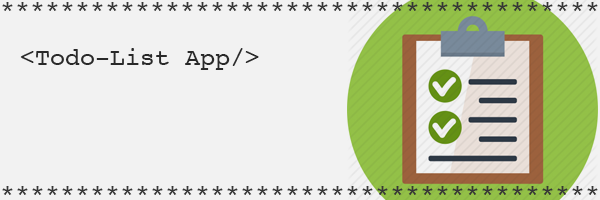
<style>
.page{position:relative;width:600px;height:200px;background:#f2f2f2}
.page>*{position:absolute;margin:0}
.t1{font:25px "Courier";color:#363636}
</style>
<div class="page">
<p class="t1" style="left:2px;top:2px;width:596px;height:9px">****************************************</p>
<p class="t1" style="left:20px;top:48px;width:239px;height:22px">&lt;Todo-List App/&gt;</p>
<p class="t1" style="left:2px;top:186px;width:596px;height:9px">****************************************</p>
</div>
